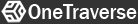
<style>
.page{position:relative;width:138px;height:24px;background:#333333}
.page>*{position:absolute;margin:0}
.t1{font:22.3px "FranklinGothic-Medium";color:#ffffff;scale:0.92 1}
</style>
<div class="page">
<p class="t1" style="left:28px;top:4px;width:109px;height:15px">OneTraverse</p>
</div>
